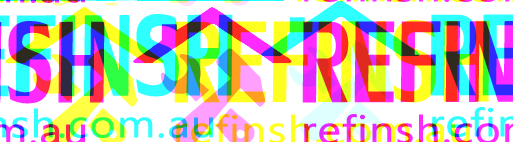
<style>
.page{position:relative;width:513px;height:142px;background:#ffffff}
.page>*{position:absolute;margin:0}
.t1{font:172.1px "LilyUPC";font-weight:bold;scale:0.69 1}
</style>
<div class="page">
<p class="t1" style="left:173px;top:13px;width:316px;height:83px">REFINSH</p>
</div>
